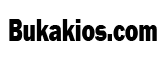
<style>
.page{position:relative;width:166px;height:62px;background:#ffffff}
.page>*{position:absolute;margin:0}
.t1{font:32px "FranklinGothic-Heavy";color:#000000;scale:0.71 1}
</style>
<div class="page">
<p class="t1" style="left:9px;top:19px;width:148px;height:22px">Bukakios.com</p>
</div>
